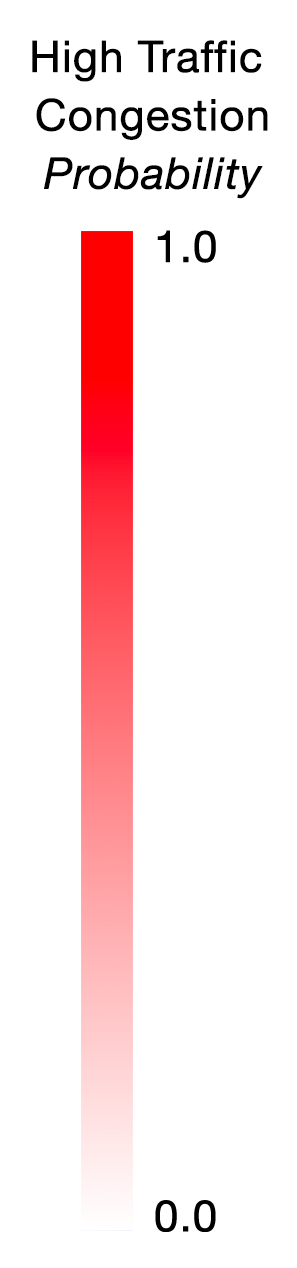
<style>
.page{position:relative;width:297px;height:1268px;background:#ffffff}
.page>*{position:absolute;margin:0}
.t1{font:75px/58.3px "HelveticaNeue";color:#000000;font-weight:bold}
.t2{font:75px/58.3px "HelveticaNeue-Italic";color:#000000;font-weight:bold}
.t3{font:75px "HelveticaNeue";color:#000000;font-weight:bold}
</style>
<div class="page">
<p class="t1" style="left:32px;top:40px;width:236px;height:159px;text-align:center">High Traffic <br>Congestion<br><span class="t2">Probability</span></p>
<p class="t3" style="left:157px;top:230px;width:59px;height:33px">1.0</p>
<p class="t3" style="left:155px;top:1200px;width:61px;height:32px">0.0</p>
</div>
